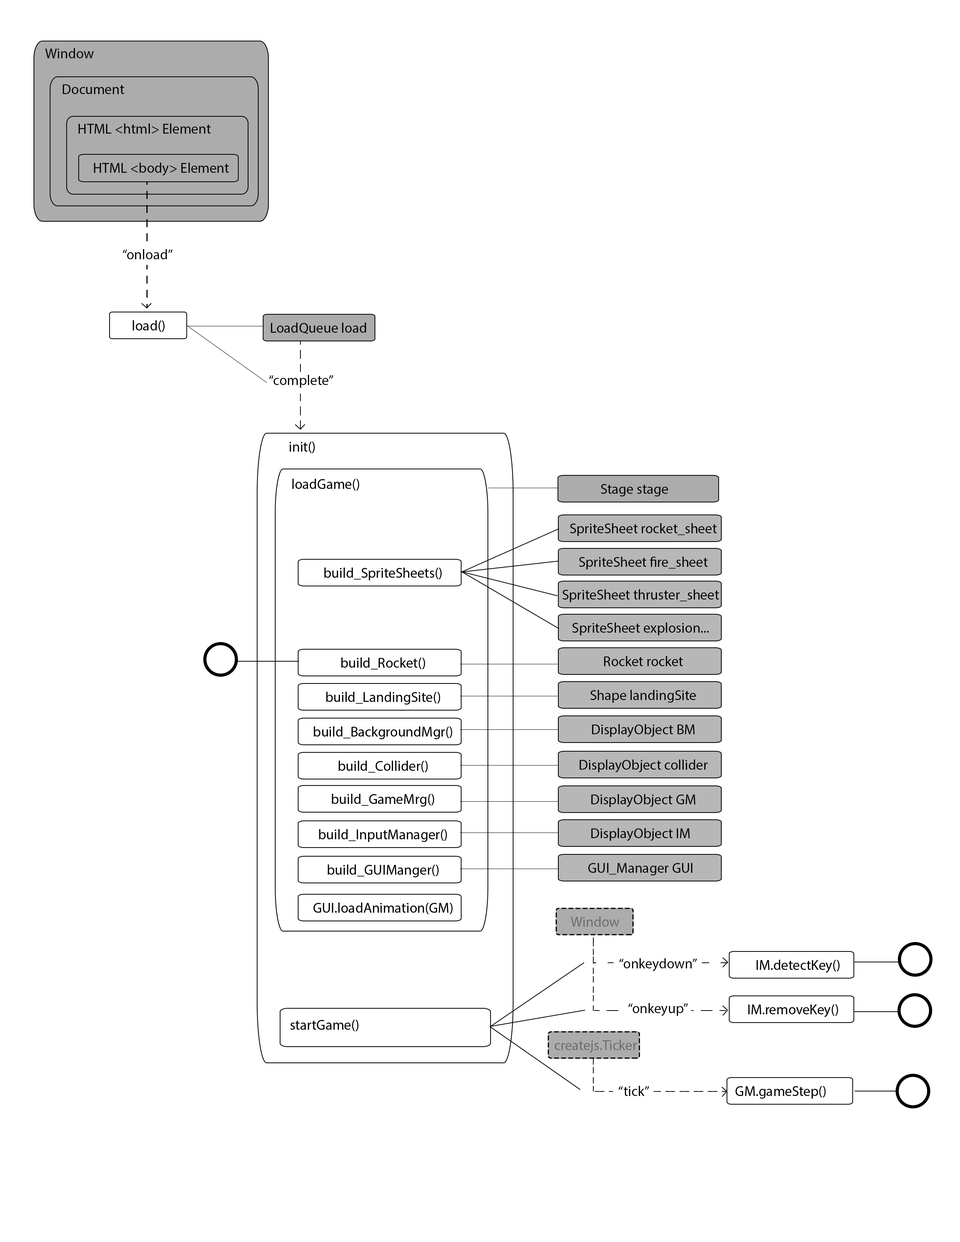
<style>
.page{position:relative;width:960px;height:1242px;background:#ffffff}
.page>*{position:absolute;margin:0}
.t1{font:14.1px "MyriadPro-Regular";color:#000000}
.t2{font:14.1px "MyriadPro-Regular";color:#6c6c6c}
</style>
<div class="page">
<p class="t1" style="left:45px;top:48px;width:49px;height:10px">Window</p>
<p class="t1" style="left:62px;top:84px;width:62px;height:10px">Document</p>
<p class="t1" style="left:78px;top:123px;width:133px;height:11px">HTML &lt;html&gt; Element</p>
<p class="t1" style="left:94px;top:163px;width:135px;height:13px">HTML &lt;body&gt; Element</p>
<p class="t1" style="left:123px;top:249px;width:50px;height:10px">“onload”</p>
<p class="t1" style="left:133px;top:320px;width:32px;height:12px">load()</p>
<p class="t1" style="left:271px;top:323px;width:95px;height:11px">LoadQueue load</p>
<p class="t1" style="left:269px;top:375px;width:65px;height:13px">“complete”</p>
<p class="t1" style="left:289px;top:442px;width:26px;height:11px">init()</p>
<p class="t1" style="left:292px;top:479px;width:67px;height:11px">loadGame()</p>
<p class="t1" style="left:601px;top:484px;width:67px;height:13px">Stage stage</p>
<p class="t1" style="left:570px;top:523px;width:147px;height:13px">SpriteSheet rocket_sheet</p>
<p class="t1" style="left:579px;top:557px;width:129px;height:13px">SpriteSheet fire_sheet</p>
<p class="t1" style="left:324px;top:568px;width:118px;height:12px">build_SpriteSheets()</p>
<p class="t1" style="left:562px;top:589px;width:157px;height:13px">SpriteSheet thruster_sheet</p>
<p class="t1" style="left:572px;top:623px;width:137px;height:12px">SpriteSheet explosion...</p>
<p class="t1" style="left:341px;top:658px;width:84px;height:12px">build_Rocket()</p>
<p class="t1" style="left:604px;top:656px;width:79px;height:10px">Rocket rocket</p>
<p class="t1" style="left:326px;top:692px;width:114px;height:13px">build_LandingSite()</p>
<p class="t1" style="left:590px;top:690px;width:106px;height:13px">Shape landingSite</p>
<p class="t1" style="left:592px;top:724px;width:103px;height:13px">DisplayObject BM</p>
<p class="t1" style="left:314px;top:727px;width:138px;height:12px">build_BackgroundMgr()</p>
<p class="t1" style="left:338px;top:761px;width:90px;height:12px">build_Collider()</p>
<p class="t1" style="left:579px;top:760px;width:129px;height:13px">DisplayObject collider</p>
<p class="t1" style="left:332px;top:794px;width:102px;height:13px">build_GameMrg()</p>
<p class="t1" style="left:591px;top:794px;width:104px;height:13px">DisplayObject GM</p>
<p class="t1" style="left:319px;top:829px;width:128px;height:13px">build_InputManager()</p>
<p class="t1" style="left:591px;top:828px;width:99px;height:13px">DisplayObject IM</p>
<p class="t1" style="left:327px;top:865px;width:112px;height:12px">build_GUIManger()</p>
<p class="t1" style="left:588px;top:863px;width:104px;height:13px">GUI_Manager GUI</p>
<p class="t1" style="left:313px;top:903px;width:139px;height:11px">GUI.loadAnimation(GM)</p>
<p class="t2" style="left:571px;top:917px;width:48px;height:10px">Window</p>
<p class="t1" style="left:619px;top:958px;width:78px;height:14px">“onkeydown”</p>
<p class="t1" style="left:756px;top:960px;width:83px;height:13px">IM.detectKey()</p>
<p class="t1" style="left:628px;top:1003px;width:60px;height:13px">“onkeyup”</p>
<p class="t1" style="left:748px;top:1004px;width:90px;height:14px">IM.removeKey()</p>
<p class="t1" style="left:290px;top:1020px;width:68px;height:11px">startGame()</p>
<p class="t2" style="left:554px;top:1040px;width:83px;height:13px">createjs.Ticker</p>
<p class="t1" style="left:618px;top:1086px;width:31px;height:10px">“tick”</p>
<p class="t1" style="left:735px;top:1086px;width:91px;height:13px">GM.gameStep()</p>
</div>
